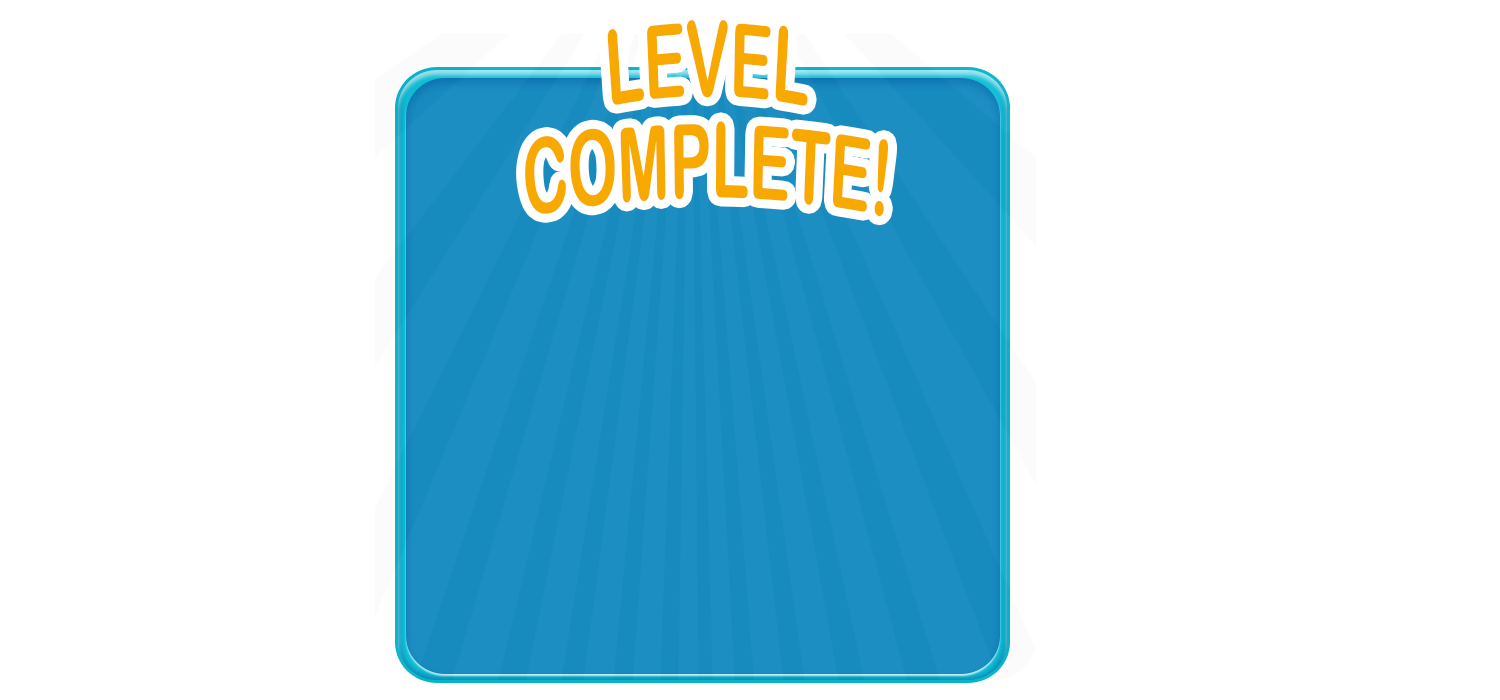
<style>
.page{position:relative;width:1500px;height:700px;background:#ffffff}
.page>*{position:absolute;margin:0}
.t1{font:103.7px "ArialRoundedMTBold";color:#f8a900;text-transform:uppercase;scale:0.59 1}
</style>
<div class="page">
<p class="t1" style="left:607px;top:20px;width:201px;height:86px">LEVEL</p>
<p class="t1" style="left:525px;top:121px;width:363px;height:96px">COMPLETE!</p>
</div>
